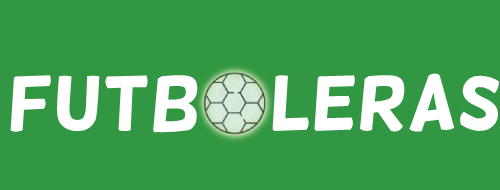
<style>
.page{position:relative;width:500px;height:190px;background:#329742}
.page>*{position:absolute;margin:0}
.t1{font:75px "Helsinki";color:#ffffff}
</style>
<div class="page">
<p class="t1" style="left:10px;top:74px;width:189px;height:60px">FUTB</p>
<p class="t1" style="left:272px;top:71px;width:228px;height:63px">LERAS</p>
</div>
